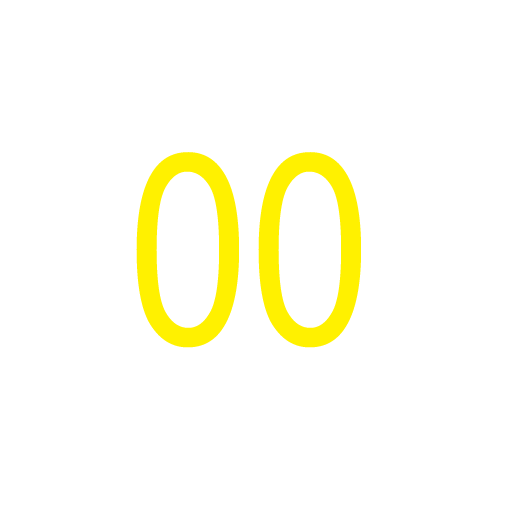
<style>
.page{position:relative;width:512px;height:512px;background:#ffffff}
.page>*{position:absolute;margin:0}
.t1{font:266.6px "ArialNarrow";color:#fff100}
</style>
<div class="page">
<p class="t1" style="left:136px;top:152px;width:225px;height:196px">00</p>
</div>
